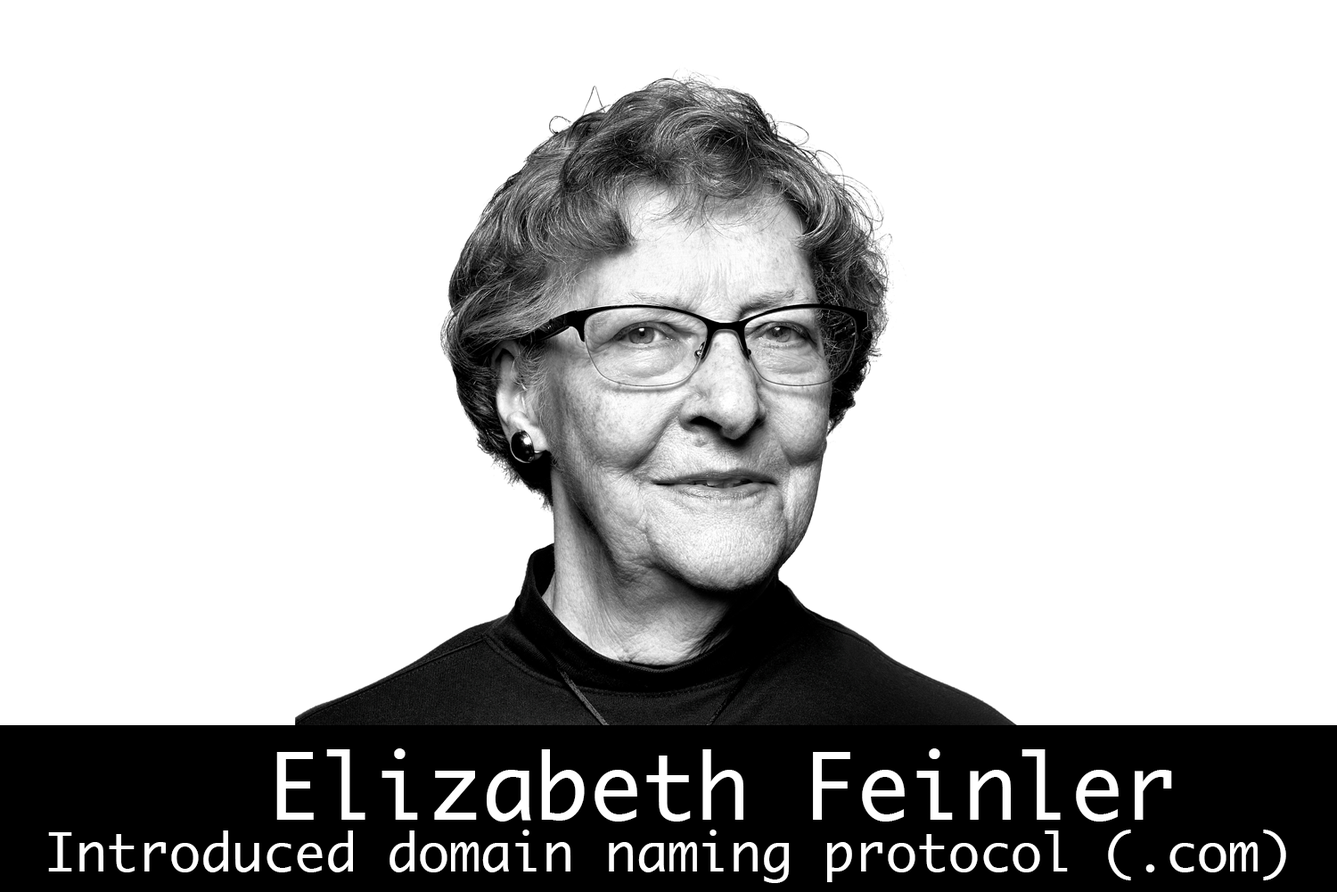
<style>
.page{position:relative;width:1337px;height:892px;background:#ffffff}
.page>*{position:absolute;margin:0}
.t1{font:89.2px "Ayuthaya";color:#ffffff}
.t2{font:52px "Ayuthaya";color:#ffffff}
</style>
<div class="page">
<p class="t1" style="left:276px;top:748px;width:896px;height:73px">Elizabeth Feinler</p>
<p class="t2" style="left:48px;top:829px;width:1239px;height:54px">Introduced domain naming protocol (.com)</p>
</div>
